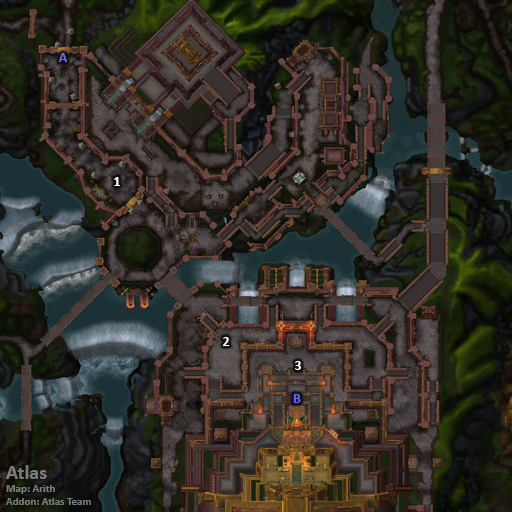
<style>
.page{position:relative;width:512px;height:512px}
.page>*{position:absolute;margin:0}
.t1{font:14px "Calibri-Bold";color:#6666ff}
.t2{font:14px "Calibri-Bold";color:#ffffff}
.t3{font:11px "Calibri-Bold";color:#7a7c78}
.t4{font:20px "Calibri-Bold";color:#7a7c78}
</style>
<div class="page">
<p class="t1" style="left:58px;top:53px;width:9px;height:9px">A</p>
<p class="t2" style="left:114px;top:177px;width:6px;height:9px">1</p>
<p class="t2" style="left:223px;top:337px;width:7px;height:9px">2</p>
<p class="t2" style="left:295px;top:361px;width:6px;height:9px">3</p>
<p class="t1" style="left:293px;top:394px;width:8px;height:9px">B</p>
<p class="t3" style="left:6px;top:465px;width:85px;height:40px"><span class="t4">Atlas<br></span>Map: Arith<br>Addon: Atlas Team</p>
</div>
